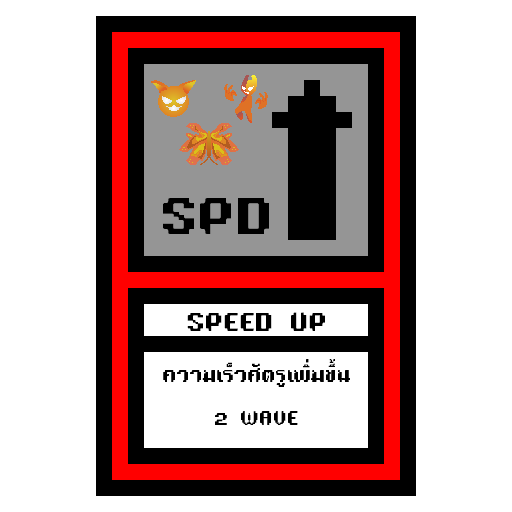
<style>
.page{position:relative;width:512px;height:512px;background:#ffffff}
.page>*{position:absolute;margin:0}
.t1{font:48px "TA16BIT-Regular";color:#000000}
.t2{font:24px "TA16BIT-Regular";color:#000000}
.t3{font:18px "TA16BIT-Regular";color:#000000}
</style>
<div class="page">
<p class="t1" style="left:163px;top:198px;width:106px;height:36px">SPD</p>
<p class="t2" style="left:187px;top:312px;width:138px;height:19px">SPEED UP</p>
<p class="t3" style="left:163px;top:359px;width:187px;height:66px;text-align:center">ความเร็วศัตรูเพิ่มขึ้น<br><br>2 WAVE</p>
</div>
